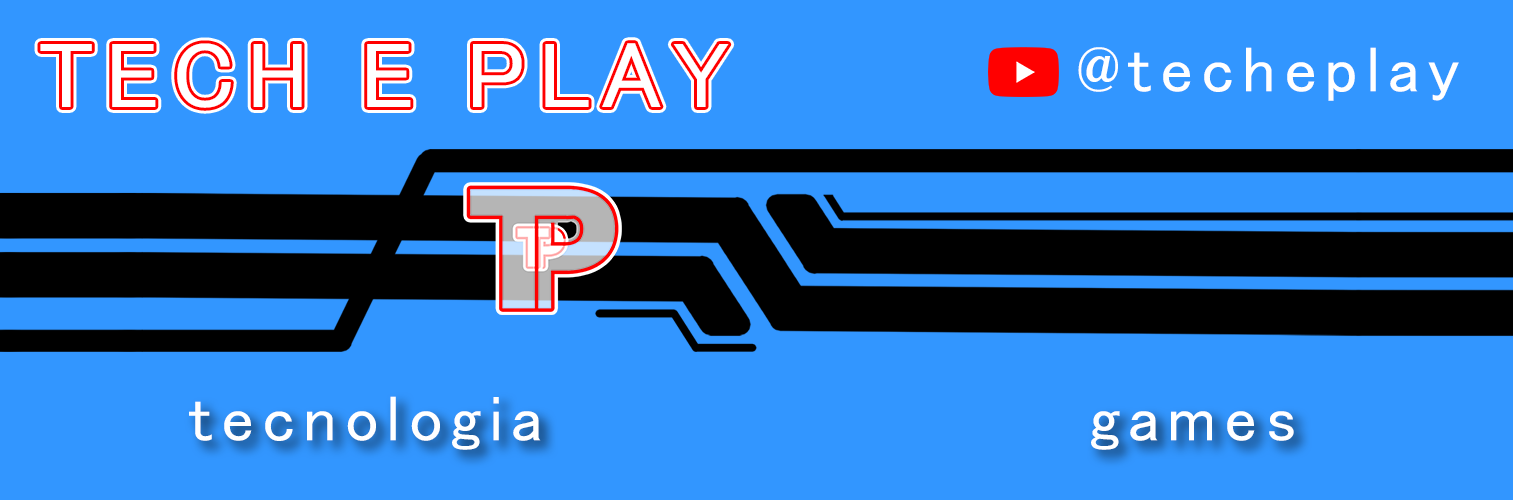
<style>
.page{position:relative;width:1513px;height:500px;background:#3296ff}
.page>*{position:absolute;margin:0}
.t1{font:93.9px "MS-PGothic";letter-spacing:0.12em;color:#ffffff}
.t2{font:65.3px "MS-PGothic";letter-spacing:0.12em;color:#ffffff}
</style>
<div class="page">
<p class="t1" style="left:40px;top:43px;width:689px;height:65px">TECH E PLAY</p>
<p class="t2" style="left:1078px;top:47px;width:381px;height:54px">@techeplay</p>
<p class="t2" style="left:189px;top:396px;width:1105px;height:54px">tecnologia                   games</p>
</div>
